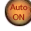
<style>
.page{position:relative;width:31px;height:31px;background:#ffffff}
.page>*{position:absolute;margin:0}
.t1{font:8px "LaoUI";color:#9c1c0b}
</style>
<div class="page">
<p class="t1" style="left:10px;top:4px;width:18px;height:17px;text-align:center">Auto<br>ON</p>
</div>
